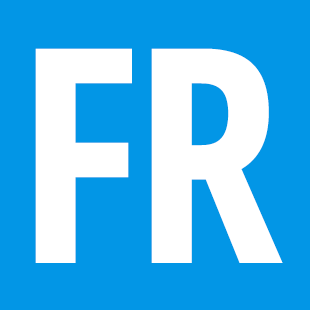
<style>
.page{position:relative;width:310px;height:310px;background:#0296e6}
.page>*{position:absolute;margin:0}
.t1{font:300px "OpenSans-CondensedBold";color:#ffffff}
</style>
<div class="page">
<p class="t1" style="left:35px;top:48px;width:248px;height:215px">FR</p>
</div>
